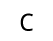
<style>
.page{position:relative;width:53px;height:41px;background:#ffffff}
.page>*{position:absolute;margin:0}
.t1{font:23.7px "DroidSans";color:#000000}
</style>
<div class="page">
<p class="t1" style="left:20px;top:13px;width:13px;height:18px">C</p>
</div>
